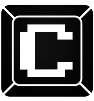
<style>
.page{position:relative;width:94px;height:101px}
.page>*{position:absolute;margin:0}
.t1{font:60px "PublicPixel";letter-spacing:-0.1em;color:#ffffff}
</style>
<div class="page">
<p class="t1" style="left:20px;top:24px;width:53px;height:53px">C</p>
</div>
